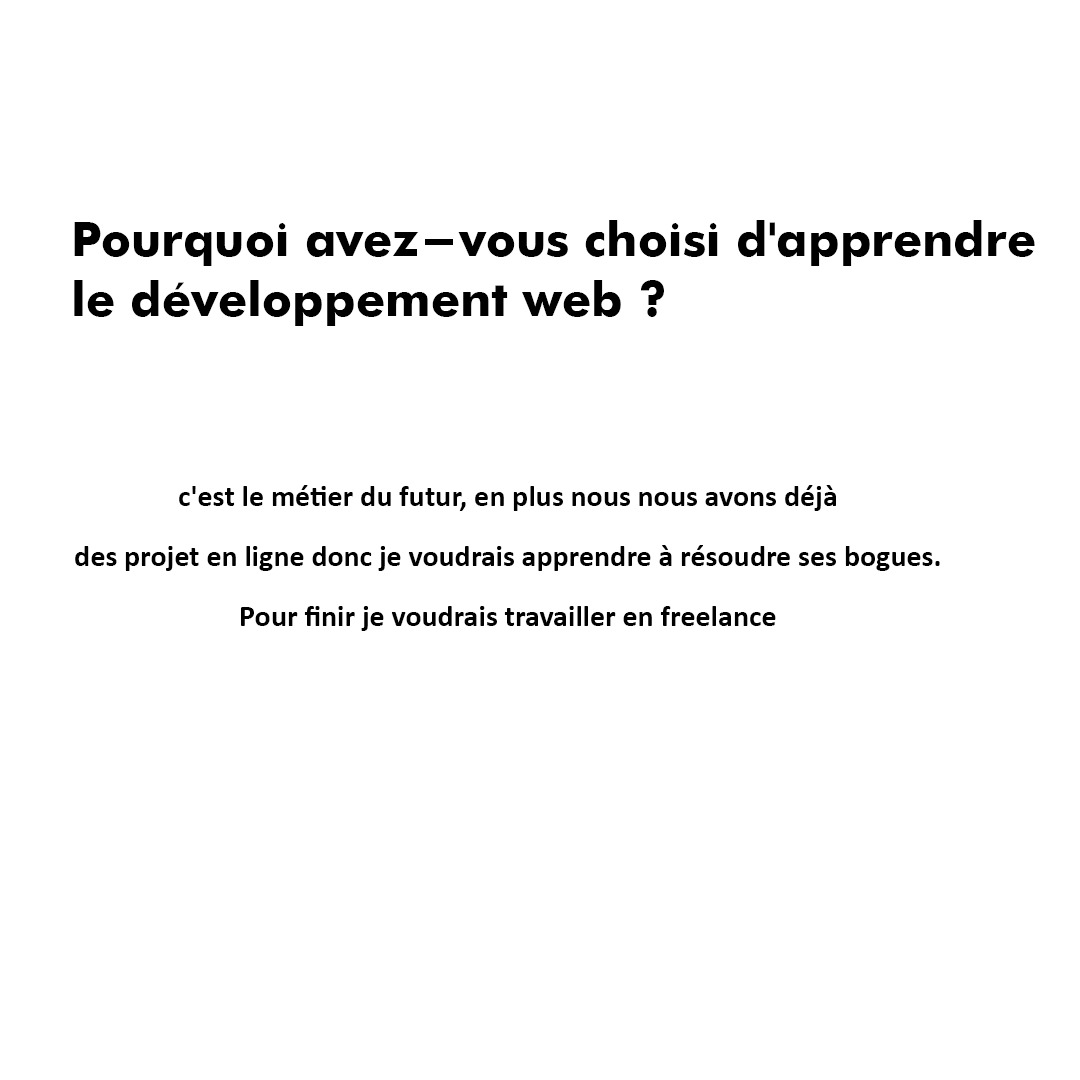
<style>
.page{position:relative;width:1080px;height:1080px;background:#ffffff}
.page>*{position:absolute;margin:0}
.t1{font:48px/60px "Futura-Bold";color:#000000}
.t2{font:30px/60px "Calibri-Bold";color:#000000}
</style>
<div class="page">
<p class="t1" style="left:74px;top:220px;width:961px;height:106px">Pourquoi avez-vous choisi d'apprendre<br>le développement web ?</p>
<p class="t2" style="left:75px;top:485px;width:865px;height:146px;text-align:center">c'est le métier du futur, en plus nous nous avons déjà <br>des projet en ligne donc je voudrais apprendre à résoudre ses bogues. <br>Pour finir je voudrais travailler en freelance</p>
</div>
